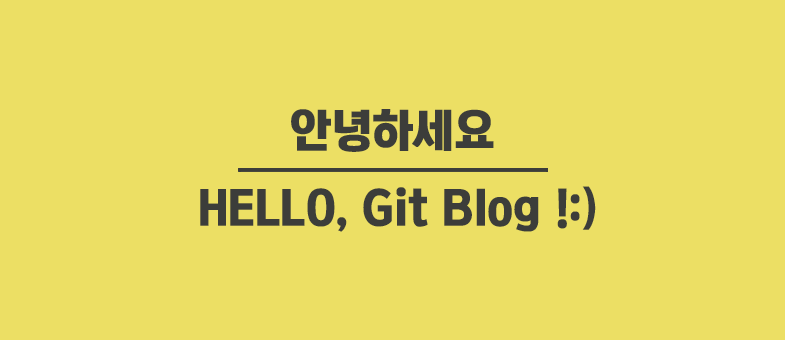
<style>
.page{position:relative;width:785px;height:340px;background:#ecdf64}
.page>*{position:absolute;margin:0}
.t1{font:46px "KoreanTITGD5-R";color:#3c3d3a}
</style>
<div class="page">
<p class="t1" style="left:291px;top:109px;width:203px;height:43px">안녕하세요</p>
<p class="t1" style="left:200px;top:186px;width:396px;height:46px">HELLO, Git Blog !:)</p>
</div>
